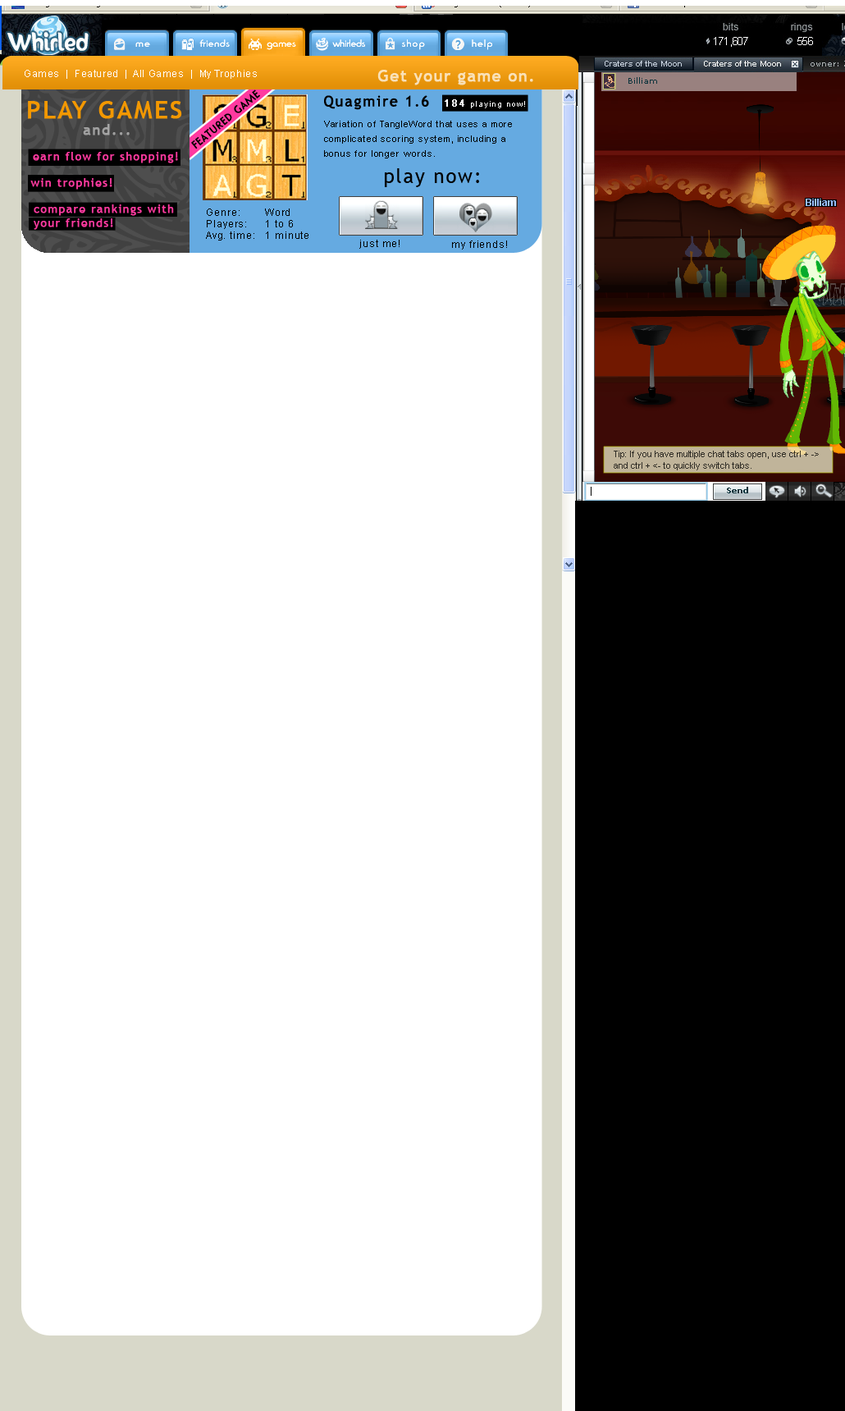
<style>
.page{position:relative;width:845px;height:1411px;background:#ffffff}
.page>*{position:absolute;margin:0}
.t1{font:9.7px "ArialMT";letter-spacing:0.05em;color:#ffffff}
.t2{font:16.1px "TrebuchetMS";letter-spacing:0.05em;color:#f9e0b7;font-weight:bold}
.t3{font:10.5px "BlippoLightSF";letter-spacing:0.075em;color:#000000;font-weight:bold}
.t4{font:24.1px "TrebuchetMS";letter-spacing:0.075em;color:#f39801;font-weight:bold}
.t5{font:14.5px "TrebuchetMS";letter-spacing:0.075em;color:#000000;font-weight:bold}
.t6{font:8px "ArialMT";letter-spacing:0.075em;color:#ffffff}
.t7{font:9.7px "ArialMT";letter-spacing:0.075em;color:#ffffff;font-weight:bold}
.t8{font:14.5px "TrebuchetMS";letter-spacing:0.075em;color:#a0a0a0;font-weight:bold}
.t9{font:8.8px/14.8px "ArialMT";letter-spacing:0.075em;color:#000000}
.t10{font:11.3px "TrebuchetMS";letter-spacing:0.075em;color:#ff3aa0;font-weight:bold}
.t11{font:19.3px "TrebuchetMS";letter-spacing:0.075em;color:#000000}
.t12{font:9.7px "ArialMT";letter-spacing:0.075em;color:#000000}
</style>
<div class="page">
<p class="t1" style="left:25px;top:70px;width:232px;height:9px">Games  |  Featured  |  All Games  |  My Trophies</p>
<p class="t2" style="left:378px;top:70px;width:155px;height:15px">Get your game on.</p>
<p class="t3" style="left:191px;top:89px;width:69px;height:60px;rotate:-40deg">FEATURED GAME</p>
<p class="t4" style="left:28px;top:101px;width:154px;height:18px">PLAY GAMES</p>
<p class="t5" style="left:324px;top:95px;width:105px;height:15px">Quagmire 1.6</p>
<p class="t6" style="left:445px;top:99px;width:80px;height:9px"><span class="t7">184 </span>playing now!</p>
<p class="t8" style="left:83px;top:124px;width:47px;height:11px">and...</p>
<p class="t9" style="left:324px;top:121px;width:188px;height:37px">Variation of TangleWord that uses a more complicated scoring system, including a bonus for longer words.</p>
<p class="t10" style="left:33px;top:152px;width:145px;height:11px">earn flow for shopping!</p>
<p class="t11" style="left:385px;top:168px;width:94px;height:19px">play now:</p>
<p class="t10" style="left:30px;top:178px;width:82px;height:12px">win trophies!</p>
<p class="t10" style="left:34px;top:204px;width:140px;height:26px">compare rankings with<br>your friends!</p>
<p class="t12" style="left:206px;top:208px;width:103px;height:32px">Genre: Word<br>Players: 1 to 6<br>Avg. time: 1 minute</p>
<p class="t12" style="left:359px;top:240px;width:41px;height:9px">just me!</p>
<p class="t12" style="left:452px;top:240px;width:55px;height:9px">my friends!</p>
</div>
